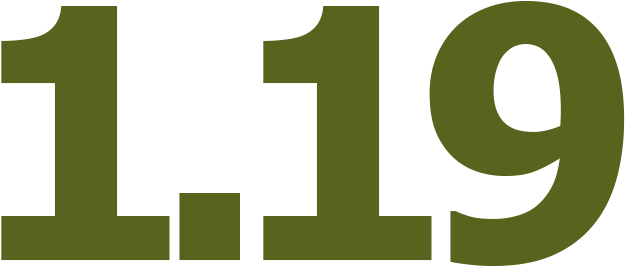
<style>
.page{position:relative;width:630px;height:266px;background:#58641d}
.page>*{position:absolute;margin:0}
.t1{font:350px "Tahoma-Bold";letter-spacing:-0.1em;color:#58641d}
</style>
<div class="page">
<p class="t1" style="left:1px;top:1px;width:624px;height:265px">1.19</p>
</div>
